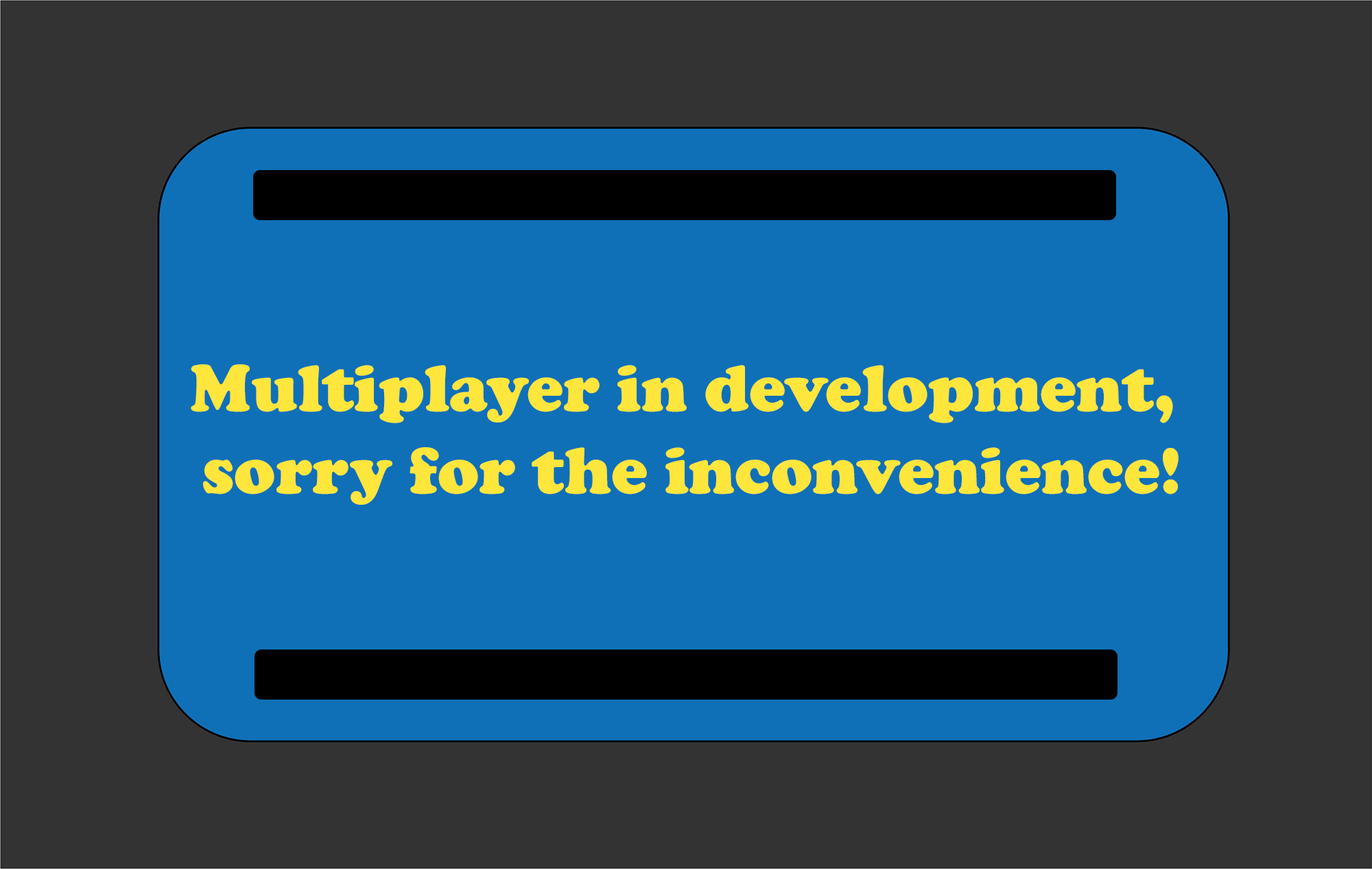
<style>
.page{position:relative;width:1372px;height:869px;background:#333333}
.page>*{position:absolute;margin:0}
.t1{font:68.6px "CooperBlack";color:#ffe63c}
</style>
<div class="page">
<p class="t1" style="left:191px;top:364px;width:988px;height:141px;text-align:center">Multiplayer in development, <br>sorry for the inconvenience!</p>
</div>
